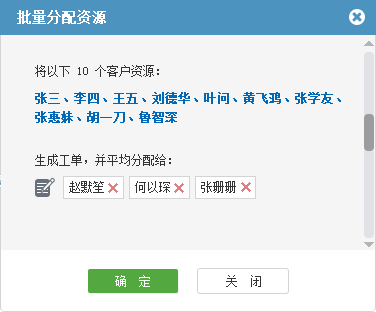
<style>
.page{position:relative;width:376px;height:312px;background:#f5f5f5}
.page>*{position:absolute;margin:0}
.t1{font:14px "SimSun";color:#ffffff;font-weight:bold}
.t2{font:12px "SimSun";color:#333333}
.t3{font:12px/19px "SimSun";color:#0068b7;font-weight:bold}
.t4{font:12px "SimSun";color:#ffffff}
</style>
<div class="page">
<p class="t1" style="left:17px;top:10px;width:89px;height:14px">批量分配资源</p>
<p class="t2" style="left:35px;top:65px;width:124px;height:12px">将以下 10 个客户资源：</p>
<p class="t3" style="left:35px;top:92px;width:306px;height:31px">张三、李四、王五、刘德华、叶问、黄飞鸿、张学友、<br>张惠妹、胡一刀、鲁智深</p>
<p class="t2" style="left:35px;top:154px;width:136px;height:12px">生成工单，并平均分配给：</p>
<p class="t2" style="left:69px;top:181px;width:35px;height:12px">赵默笙</p>
<p class="t2" style="left:135px;top:181px;width:35px;height:12px">何以琛</p>
<p class="t2" style="left:201px;top:181px;width:35px;height:12px">张珊珊</p>
<p class="t4" style="left:115px;top:275px;width:35px;height:12px">确  定</p>
<p class="t2" style="left:226px;top:275px;width:35px;height:12px">关　闭</p>
</div>
